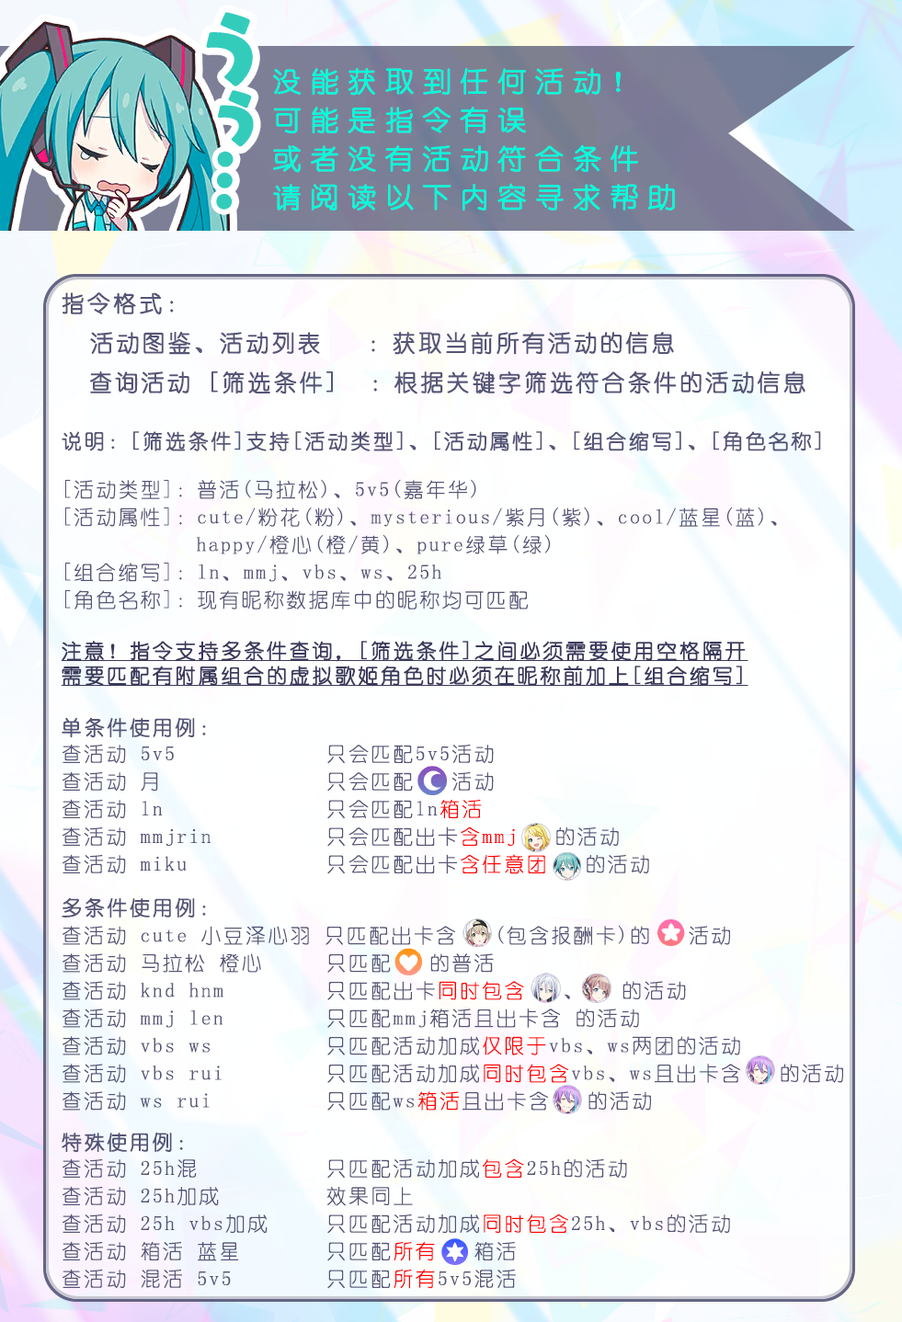
<style>
.page{position:relative;width:902px;height:1322px}
.page>*{position:absolute;margin:0}
.t1{font:27.6px/38.6px "YouYuan";letter-spacing:0.28em;color:#01ffdd;font-weight:bold;scale:1.04 1}
.t2{font:20.2px/30.3px "YouYuan";letter-spacing:0.1em;color:#555577}
.t3{font:23px/30.3px "YouYuan";letter-spacing:0.1em;color:#555577;font-weight:bold}
.t4{font:20.2px/30.3px "YouYuan";letter-spacing:0.1em;color:#555577;font-weight:bold}
.t5{font:20.2px/30.3px "YouYuan";letter-spacing:0.1em;color:#39395c;font-weight:bold;text-decoration:underline}
.t6{font:20.2px/30.3px "YouYuan";letter-spacing:0.1em;color:#ff0000}
</style>
<div class="page">
<p class="t1" style="left:273px;top:68px;width:402px;height:143px">没能获取到任何活动！<br>可能是指令有误<br>或者没有活动符合条件<br>请阅读以下内容寻求帮助</p>
<p class="t2" style="left:61px;top:292px;width:782px;height:997px"><span class="t3">指令格式：<br>  活动图鉴、活动列表   ：获取当前所有活动的信息<br>  查询活动 [筛选条件]  ：根据关键字筛选符合条件的活动信息<br><br></span><span class="t4">说明：[筛选条件]支持[活动类型]、[活动属性]、[组合缩写]、[角色名称]<br></span><br>[活动类型]：普活(马拉松)、5v5(嘉年华)<br>[活动属性]：cute/粉花(粉)、mysterious/紫月(紫)、cool/蓝星(蓝)、<br>           happy/橙心(橙/黄)、pure绿草(绿)<br>[组合缩写]：ln、mmj、vbs、ws、25h<br>[角色名称]：现有昵称数据库中的昵称均可匹配<br><br><span class="t5">注意！指令支持多条件查询，[筛选条件]之间必须需要使用空格隔开<br>需要匹配有附属组合的虚拟歌姬角色时必须在昵称前加上[组合缩写]<br><br><br></span><span class="t4">单条件使用例：<br></span>查活动 5v5      只会匹配5v5活动<br>查活动 月      只会匹配   活动<br>查活动 ln      只会匹配ln<span class="t6">箱活<br></span>查活动 mmjrin     只会匹配出卡<span class="t6">含mmj</span>   的活动<br>查活动 miku     只会匹配出卡<span class="t6">含任意团</span>   的活动<br><br><span class="t4">多条件使用例：<br></span>查活动 cute 小豆泽心羽 只匹配出卡含   (包含报酬卡)的   活动<br>查活动 马拉松 橙心   只匹配   的普活<br>查活动 knd hnm     只匹配出卡<span class="t6">同时包含</span>   、   的活动<br>查活动 mmj len    只匹配mmj箱活且出卡含 的活动<br>查活动 vbs ws     只匹配活动加成<span class="t6">仅限于</span>vbs、ws两团的活动<br>查活动 vbs rui    只匹配活动加成<span class="t6">同时包含</span>vbs、ws且出卡含   的活动<br>查活动 ws rui     只匹配ws<span class="t6">箱活</span>且出卡含   的活动<br><br><span class="t4">特殊使用例：<br></span>查活动 25h混     只匹配活动加成<span class="t6">包含</span>25h的活动<br>查活动 25h加成    效果同上<br>查活动 25h vbs加成   只匹配活动加成<span class="t6">同时包含</span>25h、vbs的活动<br>查活动 箱活 蓝星   只匹配<span class="t6">所有</span>   箱活<br>查活动 混活 5v5   只匹配<span class="t6">所有</span>5v5混活</p>
</div>
